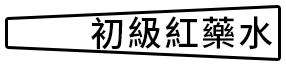
<style>
.page{position:relative;width:286px;height:66px;background:#ffffff}
.page>*{position:absolute;margin:0}
.t1{font:35px "NotoSansCJKtc-Medium";letter-spacing:0.06em;color:#000000}
</style>
<div class="page">
<p class="t1" style="left:91px;top:16px;width:182px;height:34px">初級紅藥水</p>
</div>
